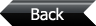
<style>
.page{position:relative;width:96px;height:26px}
.page>*{position:absolute;margin:0}
.t1{font:16px "Tahoma";color:#ffffff}
</style>
<div class="page">
<p class="t1" style="left:31px;top:7px;width:33px;height:14px">Back</p>
</div>
